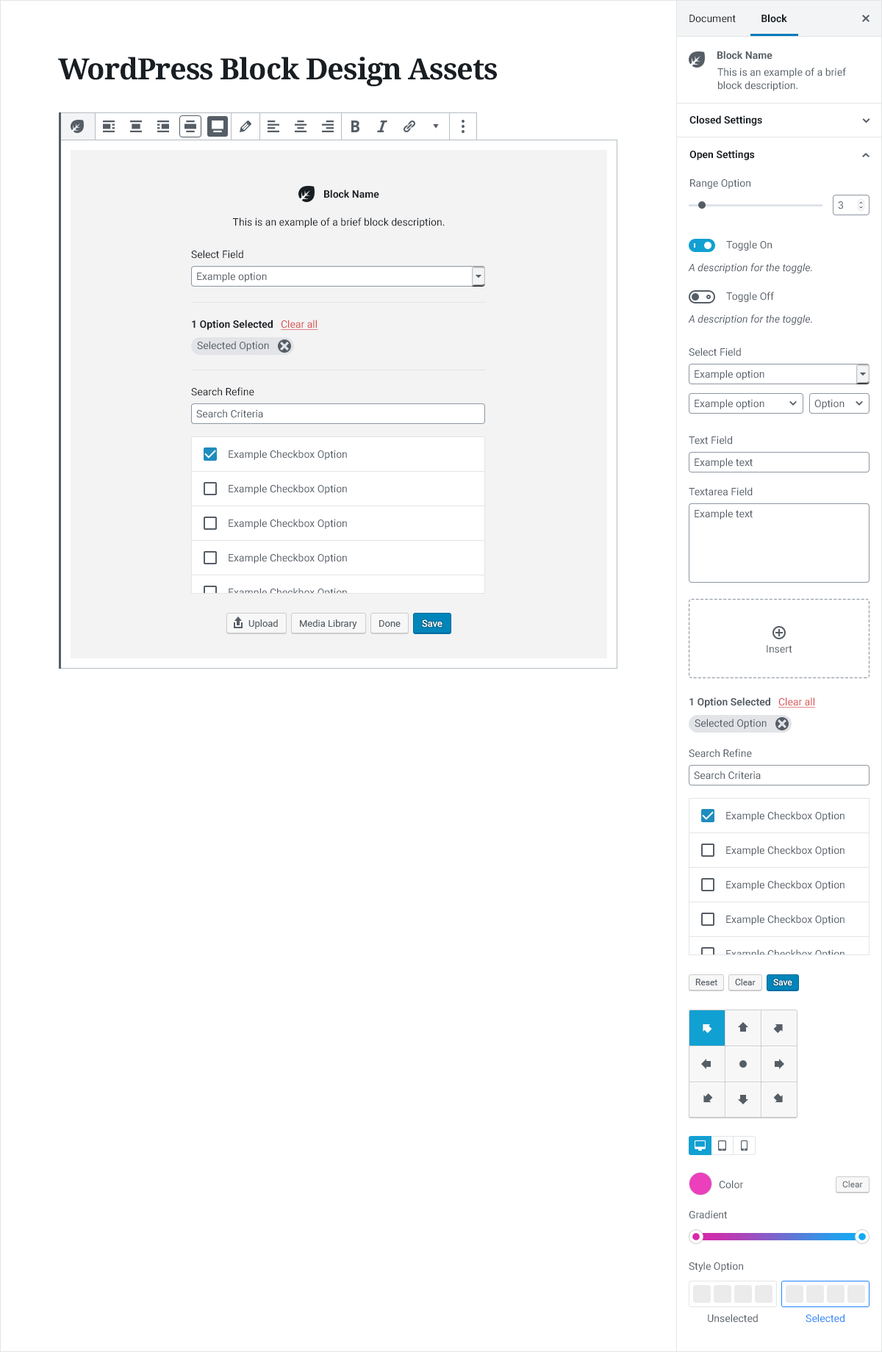
<style>
.page{position:relative;width:882px;height:1352px;background:#ffffff}
.page>*{position:absolute;margin:0}
.t1{font:10.3px "Roboto-Regular";color:#191e23}
.t2{font:10.3px "Roboto-Bold";color:#191e23}
.t3{font:10.3px "Roboto-Bold";color:#555d66}
.t4{font:29.4px "NotoSerif-Bold";letter-spacing:-0.025em;color:#191e23}
.t5{font:10.3px/13.2px "Roboto-Regular";color:#555d66}
.t6{font:10.3px "Roboto-Regular";color:#555d66}
.t7{font:10.3px "Roboto-Italic";color:#555d66}
.t8{font:10.3px "Roboto-Regular";color:#d94f4f;text-decoration:underline}
.t9{font:10.3px "Roboto-Regular"}
.t10{font:9.6px "Roboto-Regular";color:#555d66}
.t11{font:9.6px "Roboto-Regular";color:#ffffff}
.t12{font:8.8px "Roboto-Regular";color:#555d66}
.t13{font:8.8px "Roboto-Regular";color:#ffffff}
.t14{font:10.3px "Roboto-Regular";color:#2184f9}
</style>
<div class="page">
<p class="t1" style="left:689px;top:15px;width:47px;height:8px">Document</p>
<p class="t2" style="left:761px;top:14px;width:26px;height:9px">Block</p>
<p class="t3" style="left:717px;top:51px;width:55px;height:9px">Block Name</p>
<p class="t4" style="left:58px;top:57px;width:439px;height:30px">WordPress Block Design Assets</p>
<p class="t5" style="left:717px;top:68px;width:129px;height:23px">This is an example of a brief block description.</p>
<p class="t2" style="left:689px;top:115px;width:73px;height:11px">Closed Settings</p>
<p class="t2" style="left:689px;top:150px;width:66px;height:10px">Open Settings</p>
<p class="t6" style="left:690px;top:179px;width:60px;height:10px">Range Option</p>
<p class="t2" style="left:324px;top:190px;width:55px;height:8px">Block Name</p>
<p class="t6" style="left:838px;top:201px;width:5px;height:8px">3</p>
<p class="t1" style="left:232px;top:218px;width:213px;height:10px">This is an example of a brief block description.</p>
<p class="t6" style="left:726px;top:240px;width:46px;height:11px">Toggle On</p>
<p class="t1" style="left:191px;top:250px;width:52px;height:9px">Select Field</p>
<p class="t7" style="left:688px;top:263px;width:124px;height:10px">A description for the toggle.</p>
<p class="t6" style="left:197px;top:272px;width:70px;height:10px">Example option</p>
<p class="t6" style="left:726px;top:292px;width:48px;height:10px">Toggle Off</p>
<p class="t7" style="left:688px;top:315px;width:124px;height:10px">A description for the toggle.</p>
<p class="t2" style="left:192px;top:320px;width:81px;height:10px">1 Option Selected</p>
<p class="t8" style="left:281px;top:320px;width:37px;height:10px">Clear all</p>
<p class="t6" style="left:197px;top:341px;width:72px;height:10px">Selected Option</p>
<p class="t6" style="left:689px;top:348px;width:52px;height:8px">Select Field</p>
<p class="t6" style="left:694px;top:370px;width:70px;height:10px">Example option</p>
<p class="t1" style="left:191px;top:387px;width:63px;height:9px">Search Refine</p>
<p class="t6" style="left:694px;top:399px;width:70px;height:10px">Example option</p>
<p class="t6" style="left:814px;top:399px;width:30px;height:10px">Option</p>
<p class="t6" style="left:196px;top:409px;width:67px;height:9px">Search Criteria</p>
<p class="t6" style="left:689px;top:436px;width:43px;height:9px">Text Field</p>
<p class="t6" style="left:229px;top:450px;width:118px;height:10px">Example Checkbox Option</p>
<p class="t6" style="left:694px;top:458px;width:59px;height:10px">Example text</p>
<p class="t6" style="left:229px;top:484px;width:118px;height:11px">Example Checkbox Option</p>
<p class="t6" style="left:689px;top:487px;width:64px;height:9px">Textarea Field</p>
<p class="t6" style="left:694px;top:509px;width:59px;height:11px">Example text</p>
<p class="t6" style="left:229px;top:519px;width:118px;height:10px">Example Checkbox Option</p>
<p class="t6" style="left:229px;top:553px;width:118px;height:11px">Example Checkbox Option</p>
<p class="t9" style="left:229px;top:588px;width:118px;height:10px">Example Checkbox Option</p>
<p class="t10" style="left:248px;top:620px;width:30px;height:9px">Upload</p>
<p class="t10" style="left:300px;top:620px;width:57px;height:9px">Media Library</p>
<p class="t10" style="left:379px;top:620px;width:22px;height:7px">Done</p>
<p class="t11" style="left:422px;top:620px;width:20px;height:8px">Save</p>
<p class="t6" style="left:766px;top:645px;width:26px;height:8px">Insert</p>
<p class="t3" style="left:689px;top:697px;width:81px;height:11px">1 Option Selected</p>
<p class="t8" style="left:778px;top:697px;width:38px;height:11px">Clear all</p>
<p class="t6" style="left:694px;top:719px;width:72px;height:10px">Selected Option</p>
<p class="t6" style="left:689px;top:749px;width:63px;height:9px">Search Refine</p>
<p class="t6" style="left:694px;top:771px;width:67px;height:9px">Search Criteria</p>
<p class="t6" style="left:726px;top:811px;width:118px;height:11px">Example Checkbox Option</p>
<p class="t6" style="left:726px;top:846px;width:118px;height:10px">Example Checkbox Option</p>
<p class="t6" style="left:726px;top:880px;width:118px;height:11px">Example Checkbox Option</p>
<p class="t6" style="left:726px;top:915px;width:118px;height:10px">Example Checkbox Option</p>
<p class="t9" style="left:726px;top:949px;width:118px;height:11px">Example Checkbox Option</p>
<p class="t12" style="left:695px;top:979px;width:22px;height:6px">Reset</p>
<p class="t12" style="left:735px;top:979px;width:20px;height:6px">Clear</p>
<p class="t13" style="left:773px;top:979px;width:19px;height:7px">Save</p>
<p class="t6" style="left:719px;top:1180px;width:24px;height:9px">Color</p>
<p class="t12" style="left:842px;top:1180px;width:21px;height:8px">Clear</p>
<p class="t6" style="left:689px;top:1210px;width:38px;height:9px">Gradient</p>
<p class="t6" style="left:689px;top:1262px;width:54px;height:10px">Style Option</p>
<p class="t6" style="left:708px;top:1314px;width:50px;height:9px">Unselected</p>
<p class="t14" style="left:805px;top:1314px;width:39px;height:9px">Selected</p>
</div>
